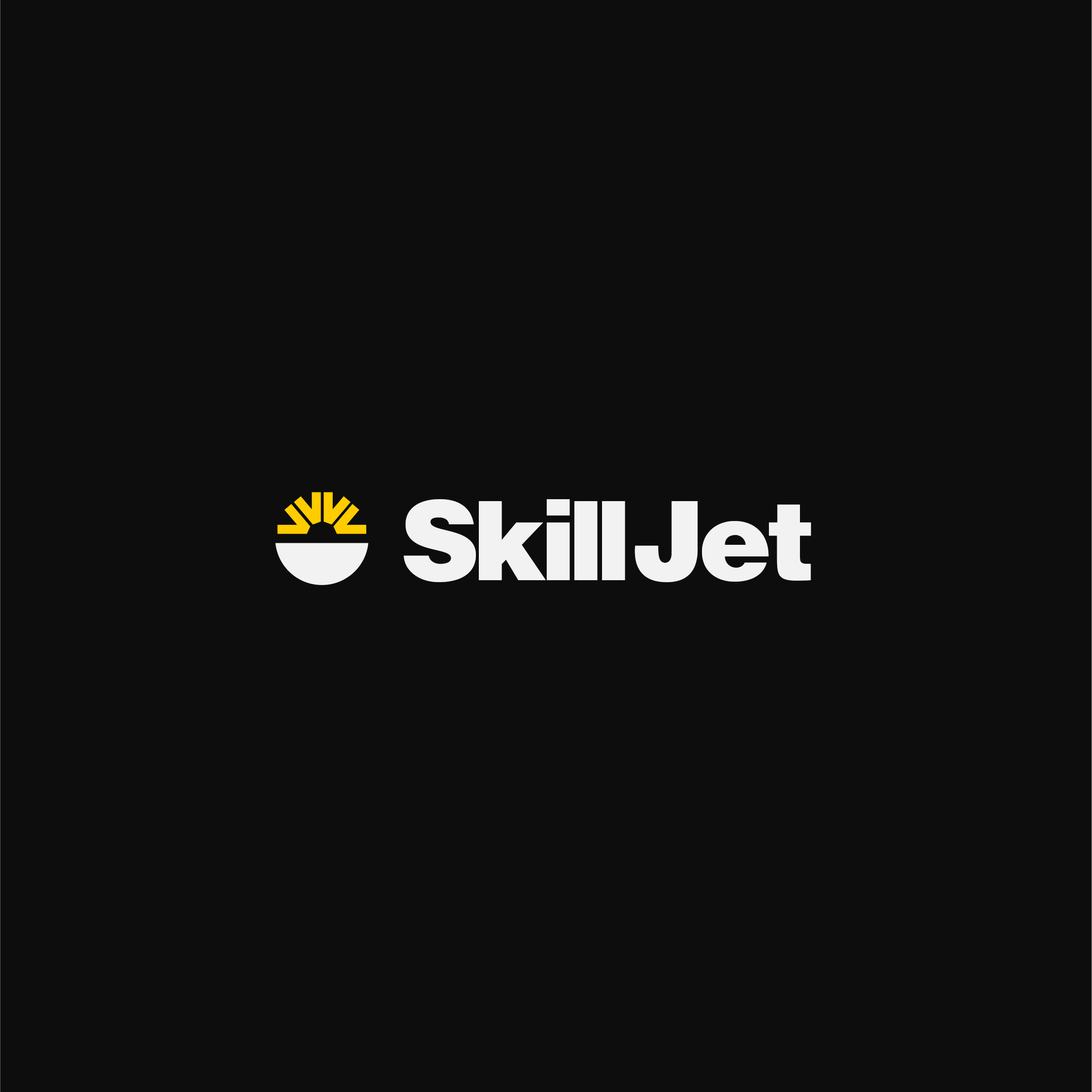
<style>
.page{position:relative;width:1092px;height:1092px;background:#0d0d0d}
.page>*{position:absolute;margin:0}
.t1{font:109.9px "Helvetica-Black";color:#f2f2f2}
</style>
<div class="page">
<p class="t1" style="left:404px;top:499px;width:407px;height:84px">SkillJet</p>
</div>
